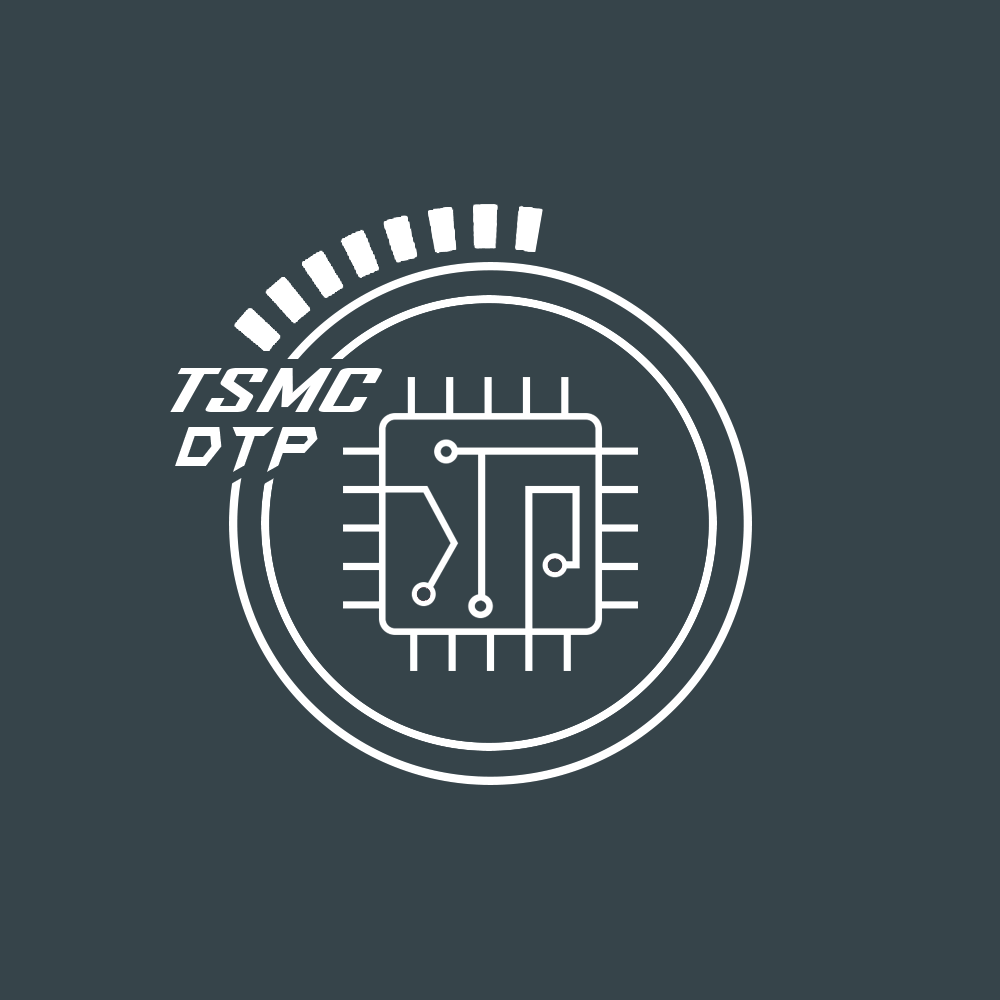
<style>
.page{position:relative;width:1000px;height:1000px;background:#36444a}
.page>*{position:absolute;margin:0}
.t1{font:59.8px "AgencyFB-Bold";letter-spacing:0.005em;color:#ffffff;font-style:italic;scale:1.86 1}
.t2{font:66.7px "BatmanForeverAlternate";letter-spacing:0.1em;color:#ffffff;font-style:italic;scale:0.78 1}
.t3{font:66.7px "BatmanForeverAlternate";color:#ffffff;font-style:italic;scale:0.78 1}
</style>
<div class="page">
<p class="t1" style="left:170px;top:368px;width:212px;height:44px">TSMC</p>
<p class="t2" style="left:175px;top:427px;width:143px;height:45px"><span class="t3">D</span>TP</p>
</div>
